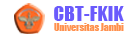
<style>
.page{position:relative;width:127px;height:36px;background:#ffffff}
.page>*{position:absolute;margin:0}
.t1{font:9.6px "Impact";color:#ff924d}
</style>
<div class="page">
<p class="t1" style="left:54px;top:23px;width:70px;height:8px">Universitas Jambi</p>
</div>
